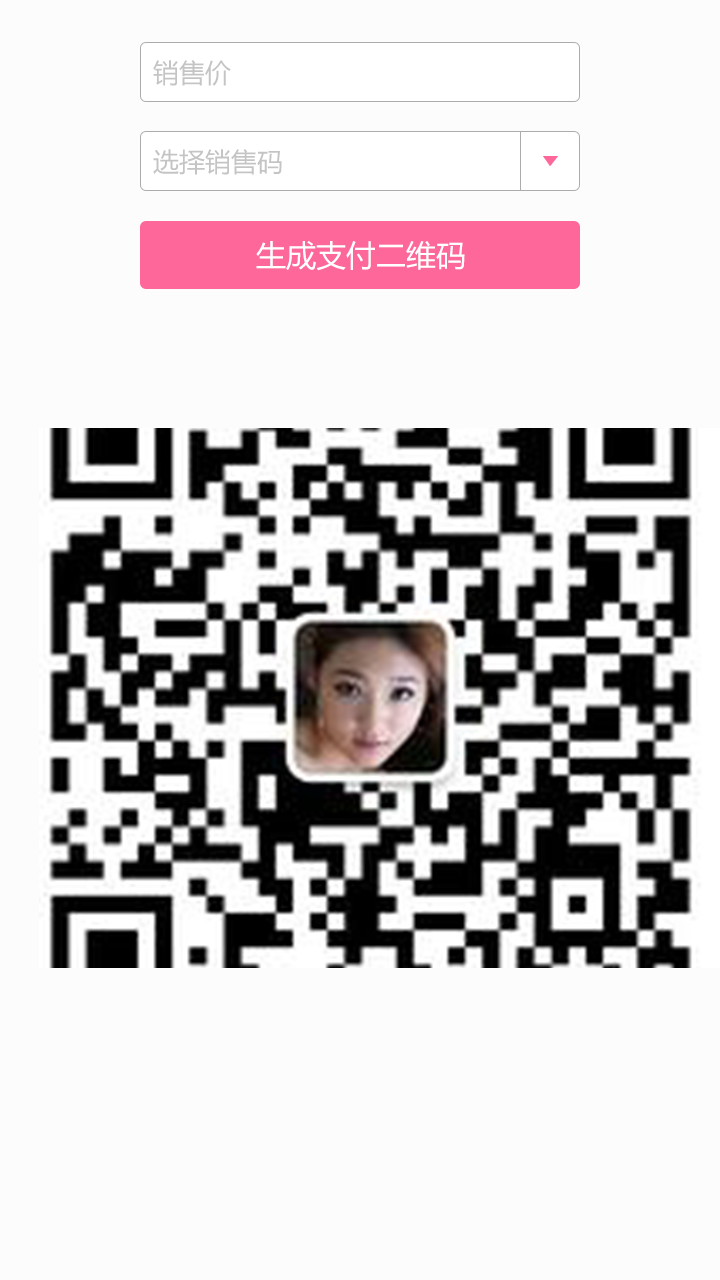
<style>
.page{position:relative;width:720px;height:1280px;background:#fcfcfd}
.page>*{position:absolute;margin:0}
.t1{font:26px "MicrosoftYaHei";color:#c4c4c4}
.t2{font:30px "MicrosoftYaHei";color:#ffffff}
</style>
<div class="page">
<p class="t1" style="left:153px;top:60px;width:78px;height:26px">销售价</p>
<p class="t1" style="left:153px;top:149px;width:129px;height:26px">选择销售码</p>
<p class="t2" style="left:256px;top:241px;width:209px;height:30px">生成支付二维码</p>
</div>
